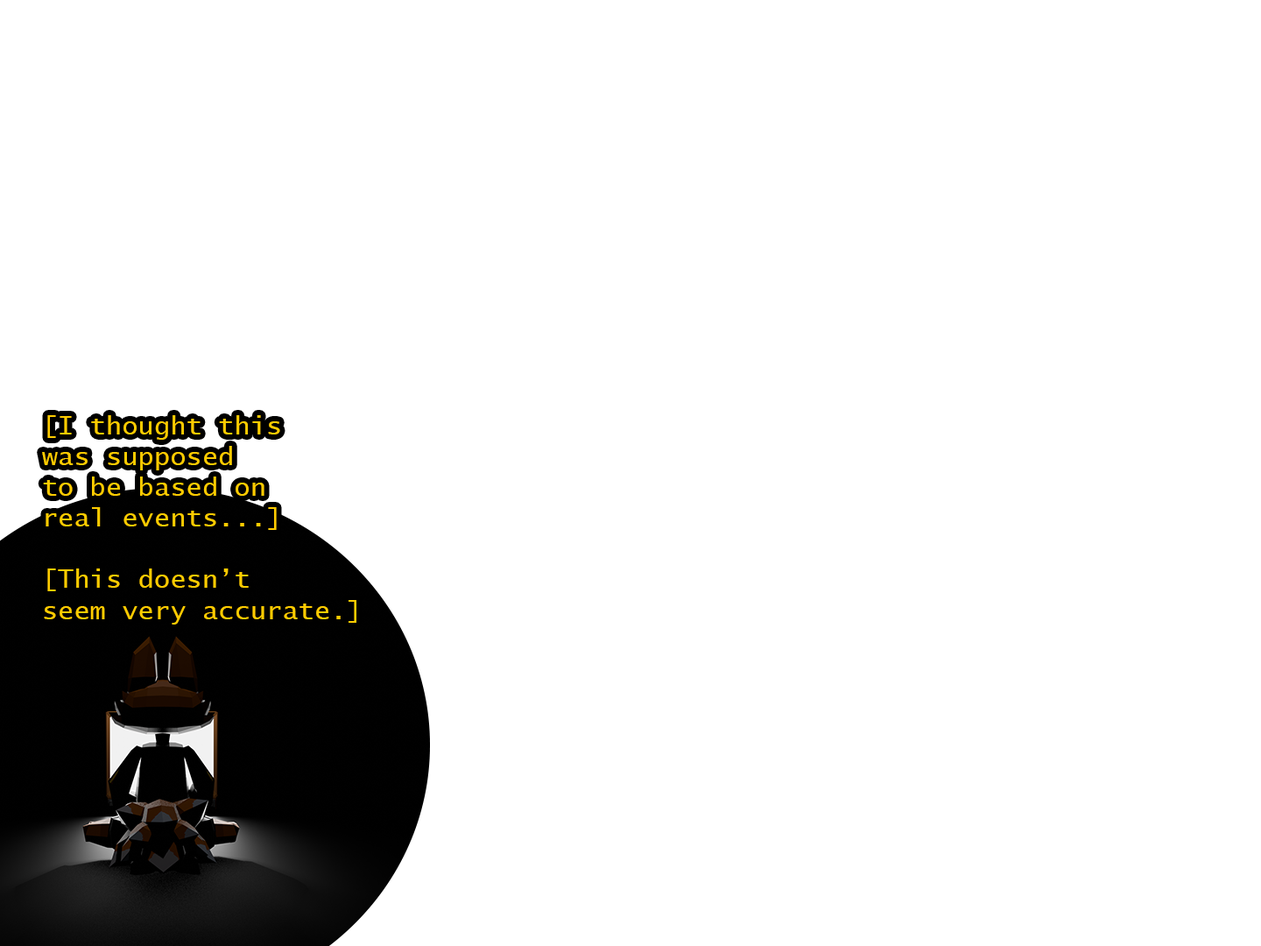
<style>
.page{position:relative;width:1261px;height:946px;background:#ffffff}
.page>*{position:absolute;margin:0}
.t1{font:25.6px "LucidaSans-Typewriter";color:#ffcc00;scale:1.04 1}
</style>
<div class="page">
<p class="t1" style="left:42px;top:415px;width:314px;height:209px">[I thought this<br>was supposed<br>to be based on <br>real events...]<br><br>[This doesn’t <br>seem very accurate.]</p>
</div>
